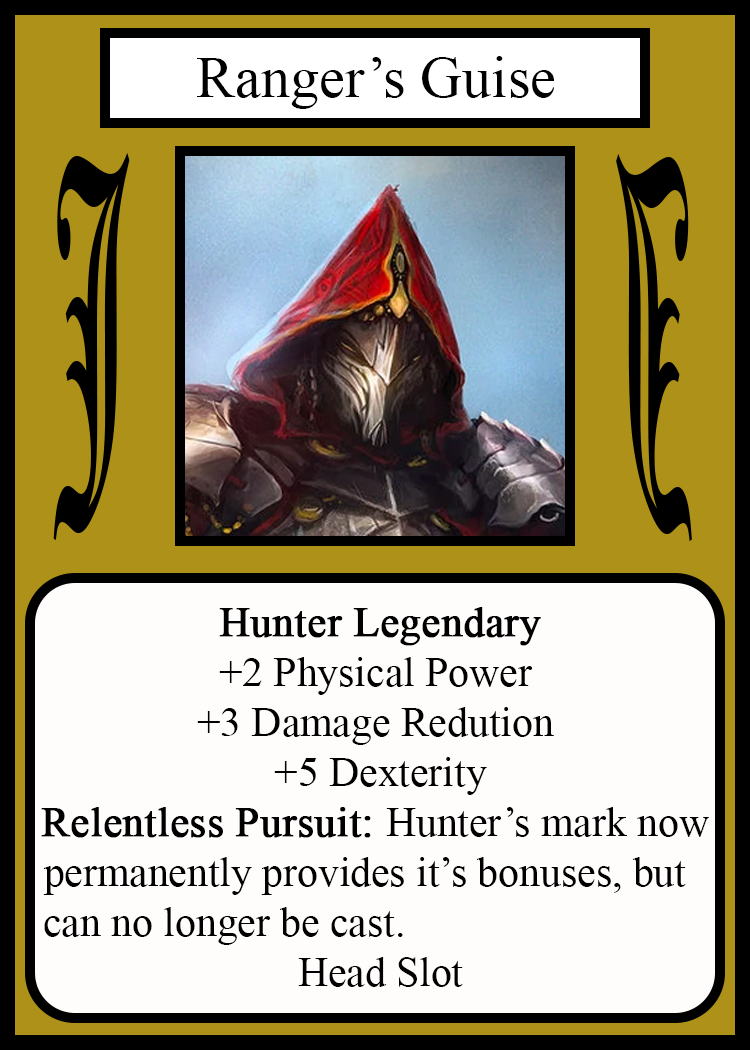
<style>
.page{position:relative;width:750px;height:1050px;background:#fffcfc}
.page>*{position:absolute;margin:0}
.t1{font:58.3px "TimesNewRomanPSMT";color:#010101}
.t2{font:450.1px "OldEnglishTextMT";color:#000000;scale:0.26 1}
.t3{font:449.7px "OldEnglishTextMT";color:#000000;scale:0.26 1}
.t4{font:41.7px "TimesNewRomanPSMT";color:#000000}
.t5{font:41.7px "TimesNewRomanPSMT";color:#000000;font-weight:bold}
</style>
<div class="page">
<p class="t1" style="left:197px;top:56px;width:358px;height:53px">Ranger’s Guise</p>
<p class="t2" style="left:53px;top:153px;width:77px;height:387px">J</p>
<p class="t3" style="left:616px;top:154px;width:76px;height:387px;rotate:180deg">J</p>
<p class="t4" style="left:41px;top:607px;width:668px;height:380px;text-align:center"><span class="t5">Hunter Legendary<br></span>+2 Physical Power<br>+3 Damage Redution<br> +5 Dexterity<br><span class="t5">Relentless Pursuit: </span>Hunter’s mark now<br>permanently provides it’s bonuses, but  <br>can no longer be cast.                             <br> Head Slot</p>
</div>
